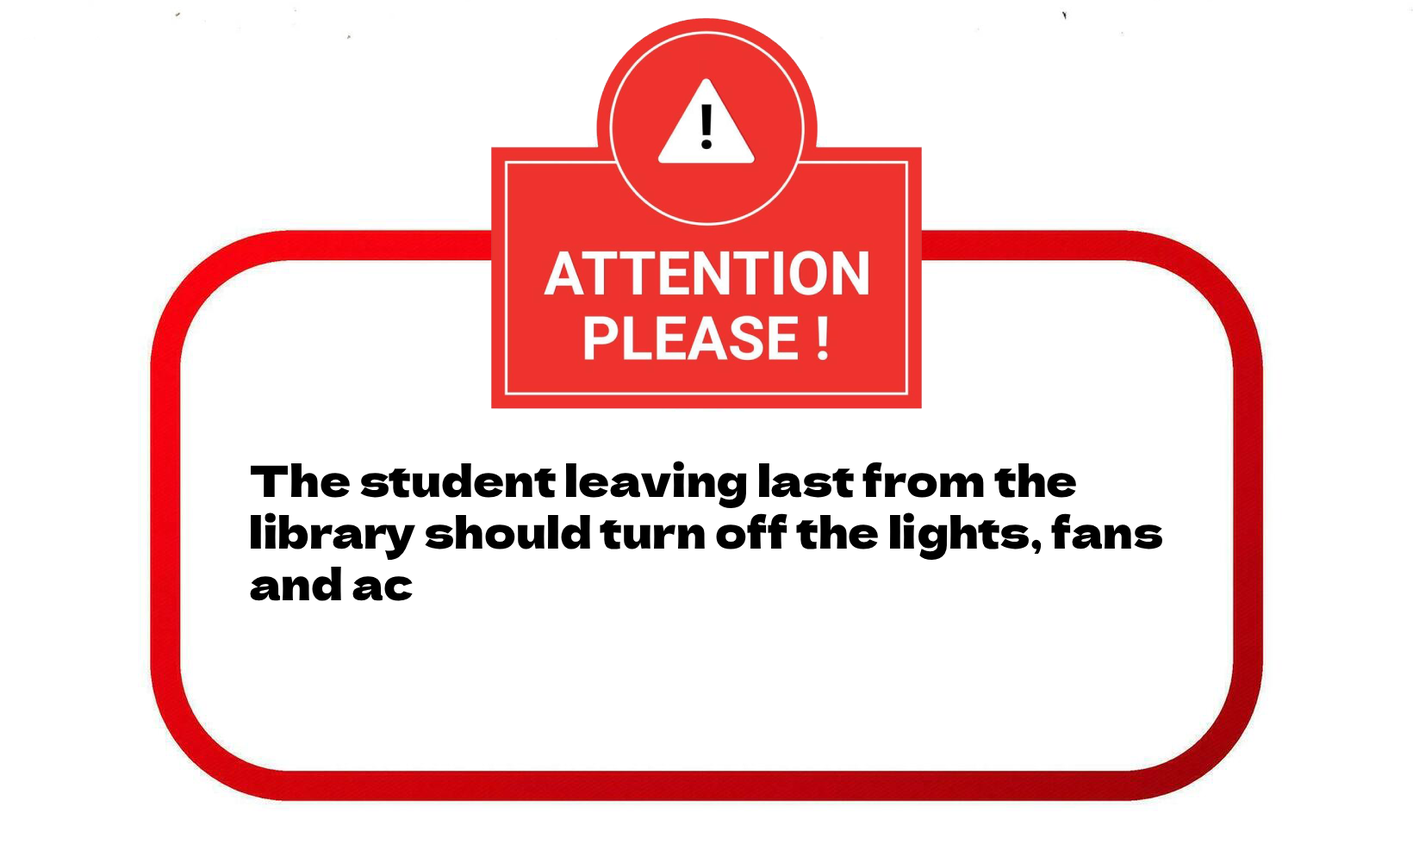
<style>
.page{position:relative;width:1413px;height:844px;background:#ffffff}
.page>*{position:absolute;margin:0}
.t1{font:43.1px "DelaGothicOne-Regular";color:#000000}
</style>
<div class="page">
<p class="t1" style="left:250px;top:461px;width:912px;height:140px">The student leaving last from the library should turn off the lights, fans and ac</p>
</div>
